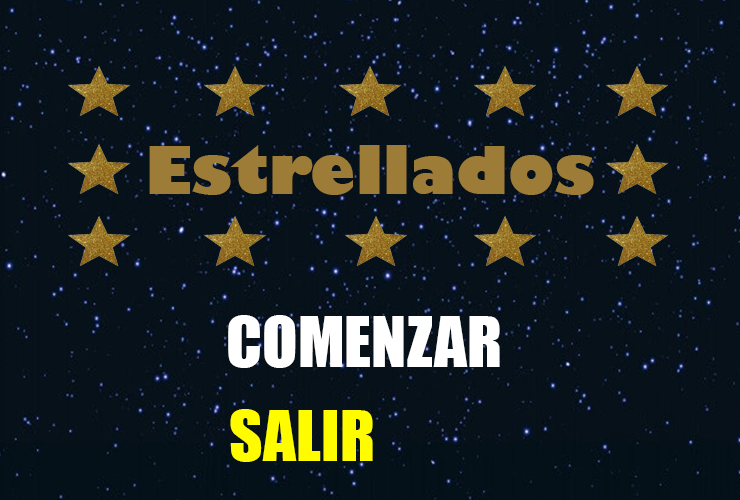
<style>
.page{position:relative;width:740px;height:500px;background:#071119}
.page>*{position:absolute;margin:0}
.t1{font:65px "GillSans-UltraBold";color:#9d7c37}
.t2{font:65px "Impact";color:#ffffff}
.t3{font:65px "Impact";color:#fffc00}
</style>
<div class="page">
<p class="t1" style="left:149px;top:145px;width:445px;height:50px">Estrellados</p>
<p class="t2" style="left:228px;top:315px;width:272px;height:53px">COMENZAR</p>
<p class="t3" style="left:230px;top:409px;width:143px;height:53px">SALIR</p>
</div>
